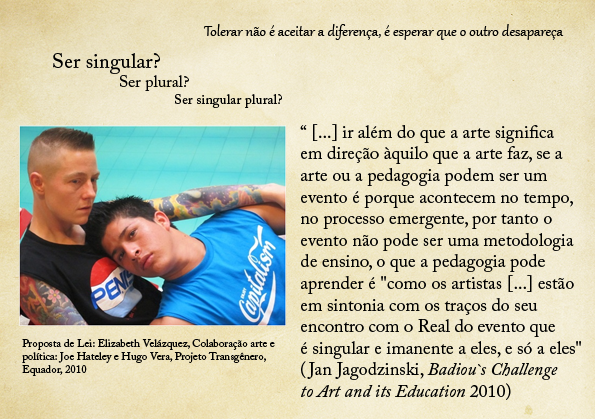
<style>
.page{position:relative;width:595px;height:419px}
.page>*{position:absolute;margin:0}
.t1{font:18px "Gabriola";color:#000000}
.t2{font:14.1px "ACaslonPro-Regular";color:#000000}
.t3{font:21.2px "ACaslonPro-Regular";color:#000000}
.t4{font:16.5px "ACaslonPro-Regular";color:#000000}
.t5{font:18px "ACaslonPro-Regular";color:#000000}
.t6{font:18px "ACaslonPro-Italic";color:#000000}
.t7{font:11px "ACaslonPro-Regular";color:#000000}
</style>
<div class="page">
<p class="t1" style="left:204px;top:24px;width:360px;height:16px">Tolerar não é aceitar a diferença, é esperar que o outro desapareça</p>
<p class="t2" style="left:53px;top:53px;width:229px;height:55px"><span class="t3">Ser singular?<br></span><span class="t4">                Ser plural?<br></span>                                  Ser singular plural?</p>
<p class="t5" style="left:300px;top:124px;width:281px;height:276px">“ [...] ir além do que a arte significa <br>em direção àquilo que a arte faz, se a <br>arte ou a pedagogia podem ser um <br>evento é porque acontecem no tempo, <br>no processo emergente, por tanto o <br>evento não pode ser uma metodologia <br>de ensino, o que a pedagogia pode <br>aprender é "como os artistas [...] estão <br>em sintonia com os traços do seu <br>encontro com o Real do evento que <br>é singular e imanente a eles, e só a eles" <br>(Jan Jagodzinski, <span class="t6">Badiou`s Challenge <br>to Art and its Education </span>2010)</p>
<p class="t7" style="left:22px;top:339px;width:253px;height:37px">Proposta de Lei: Elizabeth Velázquez, Colaboração arte e <br>política: Joe Hateley e Hugo Vera, Projeto Transgênero, <br>Equador, 2010</p>
</div>
